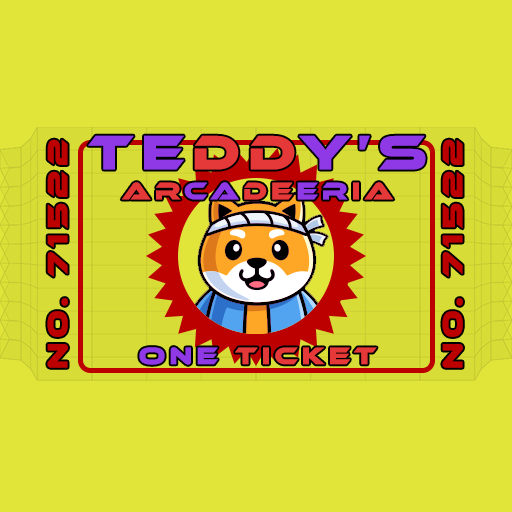
<style>
.page{position:relative;width:512px;height:512px;background:#e1e539}
.page>*{position:absolute;margin:0}
.t1{font:25px "EthnocentricRg-Bold";letter-spacing:0.15em;color:#e53939}
.t2{font:50px "EthnocentricRg-Bold";letter-spacing:0.15em;color:#8e39e5}
.t3{font:50px "EthnocentricRg-Bold";letter-spacing:0.15em;color:#e53939}
.t4{font:25px "EthnocentricRg-Bold";letter-spacing:0.15em;color:#8e39e5}
.t5{font:29.2px "EthnocentricRg-Bold";letter-spacing:0.15em;color:#bc0000}
</style>
<div class="page">
<p class="t1" style="left:88px;top:135px;width:338px;height:230px;text-align:center"><span class="t2">TE</span><span class="t3">DD</span><span class="t2">Y’S<br></span>AR<span class="t4">CA</span>DE<span class="t4">er</span>ia<br><br><br><br><br><br><span class="t4">One </span>Ticket</p>
<p class="t5" style="left:47px;top:139px;width:21px;height:229px;rotate:-90deg">N0. 71522</p>
<p class="t5" style="left:442px;top:139px;width:21px;height:229px;rotate:-90deg">N0. 71522</p>
</div>
